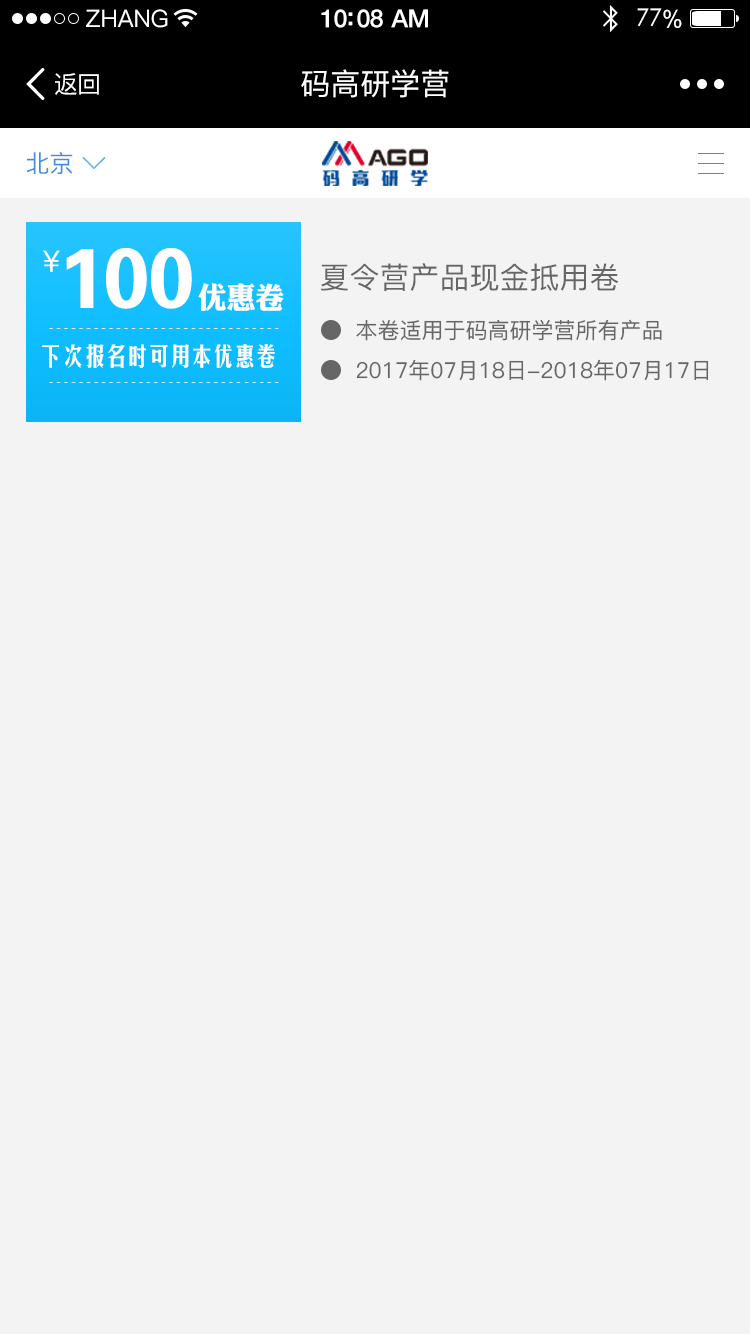
<style>
.page{position:relative;width:750px;height:1334px;background:#f3f3f3}
.page>*{position:absolute;margin:0}
.t1{font:24px "PingFang-SC-Medium";color:#ffffff}
.t2{font:25px "HelveticaNeue-Medium";letter-spacing:-0.02em;color:#ffffff}
.t3{font:24px "STXihei";letter-spacing:-0.02em;color:#ffffff}
.t4{font:24px "ArialUnicodeMS";letter-spacing:-0.02em;color:#ffffff}
.t5{font:24px "PingFang-SC-Medium";letter-spacing:-0.02em;color:#ffffff}
.t6{font:30px "PingFang-SC-Medium";color:#ffffff}
.t7{font:24px "PingFang-SC-Medium";color:#408ce1}
.t8{font:31.3px "FZHTJW--GB1-0";letter-spacing:-0.02em;color:#ffffff}
.t9{font:85px "FZDHTJW--GB1-0";letter-spacing:-0.02em;color:#ffffff}
.t10{font:30px "DFLiJinHeiW8";letter-spacing:-0.02em;color:#ffffff}
.t11{font:30px "PingFang-SC-Medium";color:#666666}
.t12{font:22px "PingFang-SC-Medium";color:#666666}
.t13{font:25px "FZMHJW--GB1-0";letter-spacing:-0.14em;color:#ffffff}
</style>
<div class="page">
<p class="t1" style="left:86px;top:9px;width:82px;height:19px">ZHANG</p>
<p class="t2" style="left:321px;top:9px;width:107px;height:19px">10:08 AM</p>
<p class="t3" style="left:637px;top:8px;width:45px;height:20px">77<span class="t4">%</span></p>
<p class="t5" style="left:55px;top:73px;width:44px;height:22px">返回</p>
<p class="t6" style="left:301px;top:69px;width:148px;height:29px">码高研学营</p>
<p class="t7" style="left:26px;top:152px;width:47px;height:22px">北京</p>
<p class="t8" style="left:43px;top:250px;width:17px;height:22px">￥</p>
<p class="t9" style="left:66px;top:248px;width:218px;height:63px">100<span class="t10">优惠卷</span></p>
<p class="t11" style="left:320px;top:263px;width:299px;height:28px">夏令营产品现金抵用卷</p>
<p class="t12" style="left:356px;top:319px;width:306px;height:22px">本卷适用于码高研学营所有产品</p>
<p class="t13" style="left:42px;top:344px;width:233px;height:24px">下次报名时可用本优惠卷</p>
<p class="t12" style="left:356px;top:359px;width:353px;height:22px">2017年07月18日-2018年07月17日</p>
</div>
